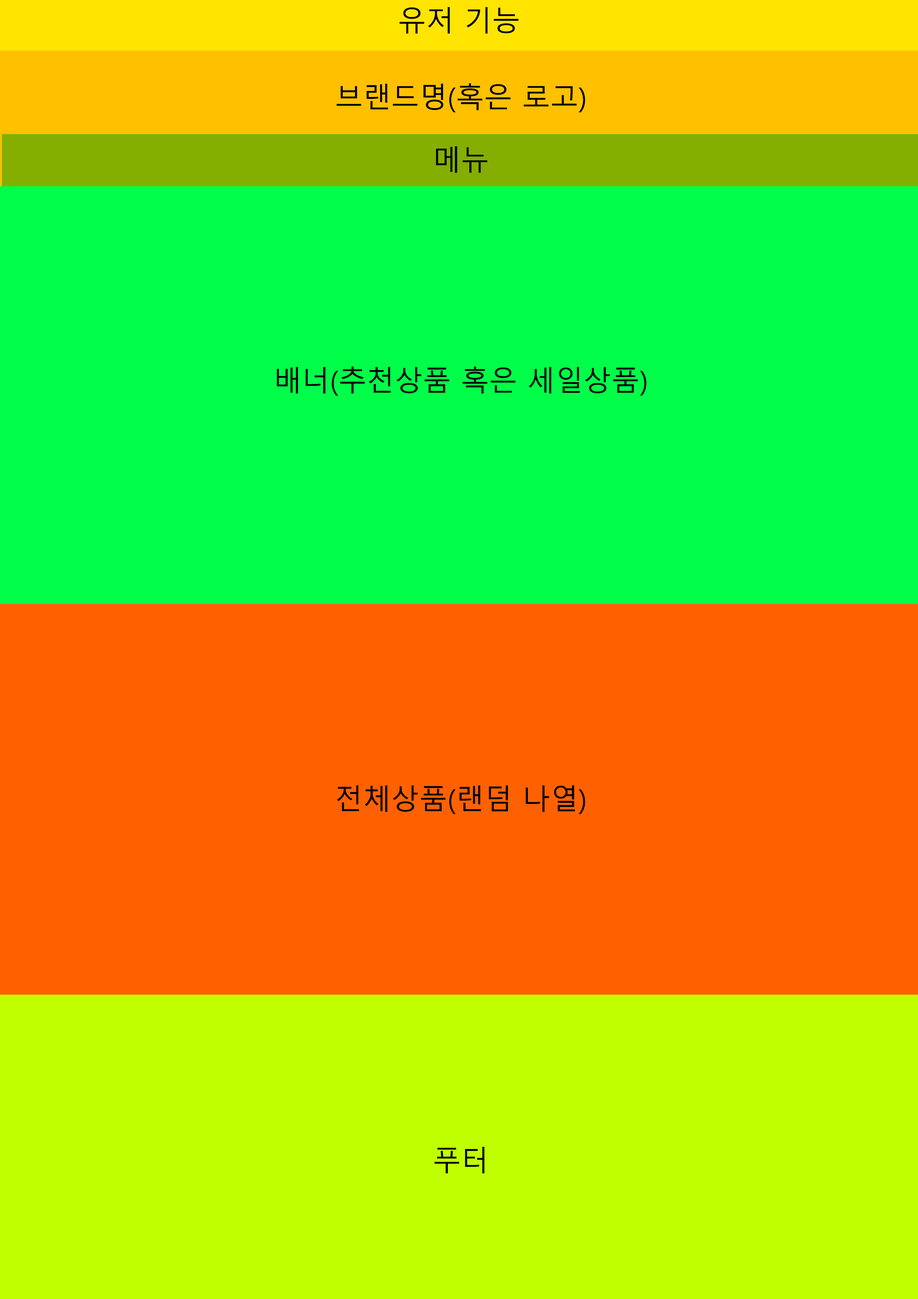
<style>
.page{position:relative;width:918px;height:1299px;background:#00ff48}
.page>*{position:absolute;margin:0}
.t1{font:28.1px "MalgunGothic";color:#000000}
</style>
<div class="page">
<p class="t1" style="left:399px;top:7px;width:120px;height:27px">유저 기능</p>
<p class="t1" style="left:337px;top:83px;width:248px;height:30px">브랜드명(혹은 로고)</p>
<p class="t1" style="left:436px;top:146px;width:52px;height:27px">메뉴</p>
<p class="t1" style="left:277px;top:366px;width:369px;height:30px">배너(추천상품 혹은 세일상품)</p>
<p class="t1" style="left:337px;top:785px;width:248px;height:29px">전체상품(랜덤 나열)</p>
<p class="t1" style="left:434px;top:1147px;width:51px;height:26px">푸터</p>
</div>
